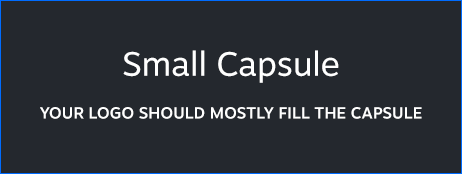
<style>
.page{position:relative;width:462px;height:174px;background:#24282e}
.page>*{position:absolute;margin:0}
.t1{font:33.5px "MotivaSans-Regular";color:#ffffff}
.t2{font:16px "MotivaSans-Medium";color:#ffffff;text-transform:uppercase}
</style>
<div class="page">
<p class="t1" style="left:123px;top:50px;width:216px;height:33px">Small Capsule</p>
<p class="t2" style="left:40px;top:107px;width:382px;height:12px">your logo should mostly fill the capsule</p>
</div>
